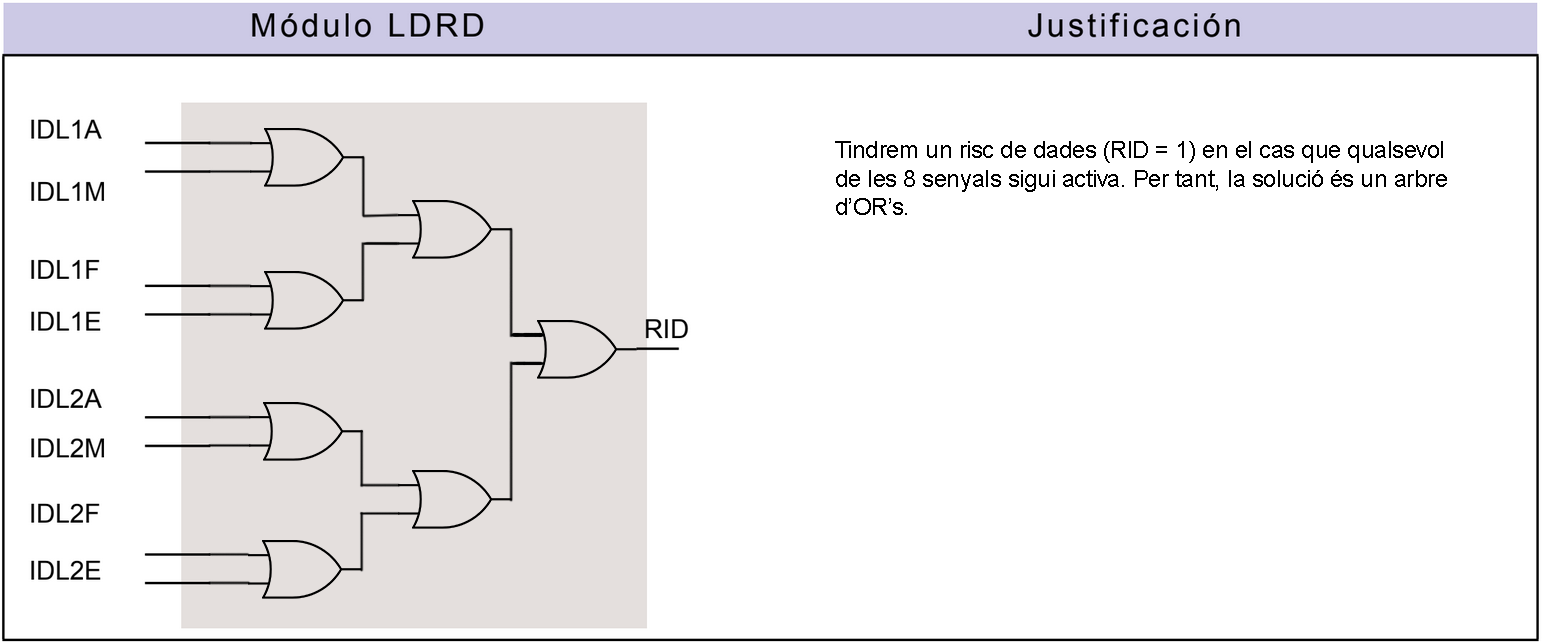
<style>
.page{position:relative;width:1542px;height:643px;background:#ffffff}
.page>*{position:absolute;margin:0}
.t1{font:24px "ArialMT";letter-spacing:-0.02em;color:#000000}
</style>
<div class="page">
<p class="t1" style="left:835px;top:141px;width:612px;height:74px">Tindrem un risc de dades (RID = 1) en el cas que qualsevol<br>de les 8 senyals sigui activa. Per tant, la solució és un arbre<br>d’OR’s.</p>
</div>
